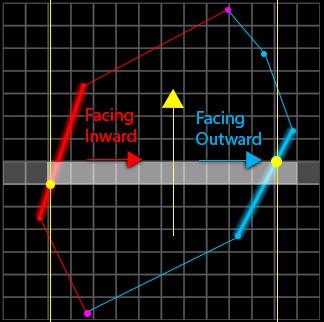
<style>
.page{position:relative;width:324px;height:322px;background:#000000}
.page>*{position:absolute;margin:0}
.t1{font:18px "MyriadPro-Regular";color:#ff0000}
.t2{font:18px "MyriadPro-Regular";color:#00aeef}
</style>
<div class="page">
<p class="t1" style="left:86px;top:108px;width:50px;height:34px">Facing Inward</p>
<p class="t2" style="left:196px;top:111px;width:65px;height:34px">Facing Outward</p>
</div>
